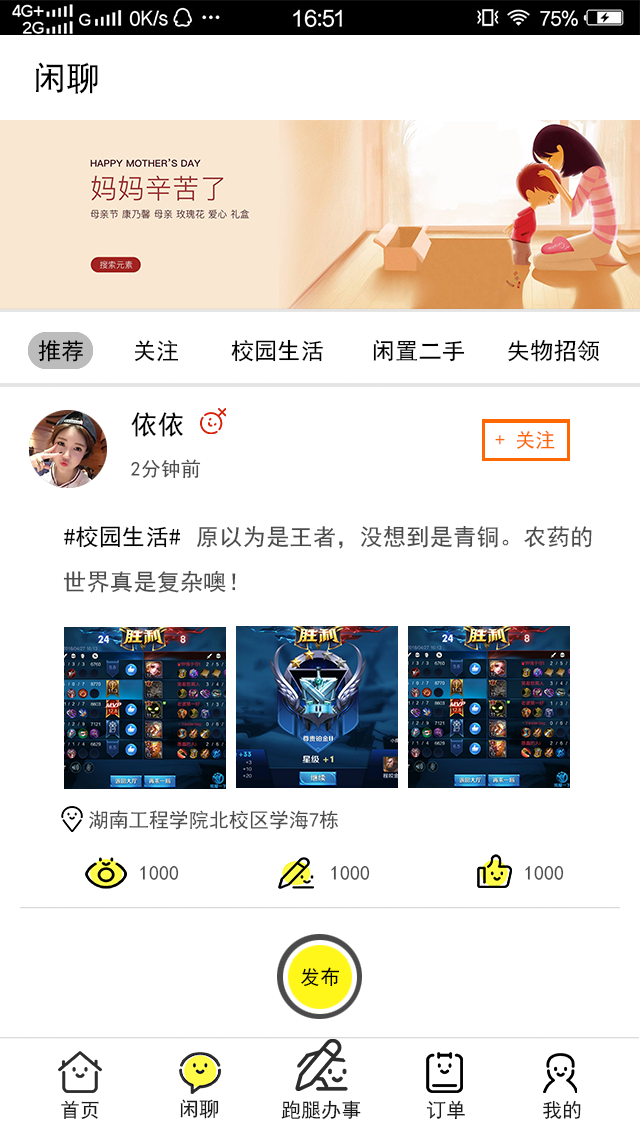
<style>
.page{position:relative;width:640px;height:1136px;background:#ffffff}
.page>*{position:absolute;margin:0}
.t1{font:33.3px "SimHei";letter-spacing:0.002em;color:#010101}
.t2{font:23.3px "SimHei";letter-spacing:0.002em;color:#000000}
.t3{font:26.7px "SimHei";letter-spacing:0.002em;color:#010101}
.t4{font:12px "SimHei";letter-spacing:0.002em;color:#ff6600}
.t5{font:20px "SimHei";letter-spacing:0.002em;color:#4b4b4b}
.t6{font:23.3px "SimHei";letter-spacing:0.002em;color:#4b4b4b}
.t7{font:12px "SimHei";letter-spacing:0.002em;color:#4b4b4b}
.t8{font:12px "SimHei";letter-spacing:0.002em;color:#000000}
.t9{font:12px "SimHei";letter-spacing:0.002em;color:#181818}
</style>
<div class="page">
<p class="t1" style="left:36px;top:62px;width:62px;height:32px">闲聊</p>
<p class="t2" style="left:38px;top:340px;width:45px;height:22px">推荐</p>
<p class="t2" style="left:134px;top:340px;width:45px;height:22px">关注</p>
<p class="t2" style="left:231px;top:339px;width:92px;height:23px">校园生活</p>
<p class="t2" style="left:373px;top:339px;width:92px;height:23px">闲置二手</p>
<p class="t2" style="left:508px;top:339px;width:92px;height:23px">失物招领</p>
<p class="t3" style="left:131px;top:412px;width:52px;height:25px">依依</p>
<p class="t4" style="left:495px;top:430px;width:60px;height:19px">+ 关注</p>
<p class="t5" style="left:131px;top:459px;width:70px;height:20px">2分钟前</p>
<p class="t2" style="left:64px;top:525px;width:117px;height:23px">#校园生活#</p>
<p class="t6" style="left:196px;top:525px;width:396px;height:24px">原以为是王者，没想到是青铜。农药的</p>
<p class="t6" style="left:63px;top:570px;width:173px;height:23px">世界真是复杂噢！</p>
<p class="t5" style="left:89px;top:810px;width:249px;height:20px">湖南工程学院北校区学海7栋</p>
<p class="t7" style="left:140px;top:865px;width:39px;height:15px">1000</p>
<p class="t7" style="left:331px;top:865px;width:39px;height:15px">1000</p>
<p class="t7" style="left:525px;top:865px;width:39px;height:15px">1000</p>
<p class="t8" style="left:301px;top:967px;width:39px;height:20px">发布</p>
<p class="t9" style="left:61px;top:1100px;width:38px;height:19px">首页</p>
<p class="t9" style="left:180px;top:1099px;width:39px;height:20px">闲聊</p>
<p class="t9" style="left:281px;top:1100px;width:80px;height:20px">跑腿办事</p>
<p class="t9" style="left:426px;top:1100px;width:39px;height:20px">订单</p>
<p class="t9" style="left:543px;top:1100px;width:38px;height:19px">我的</p>
</div>
